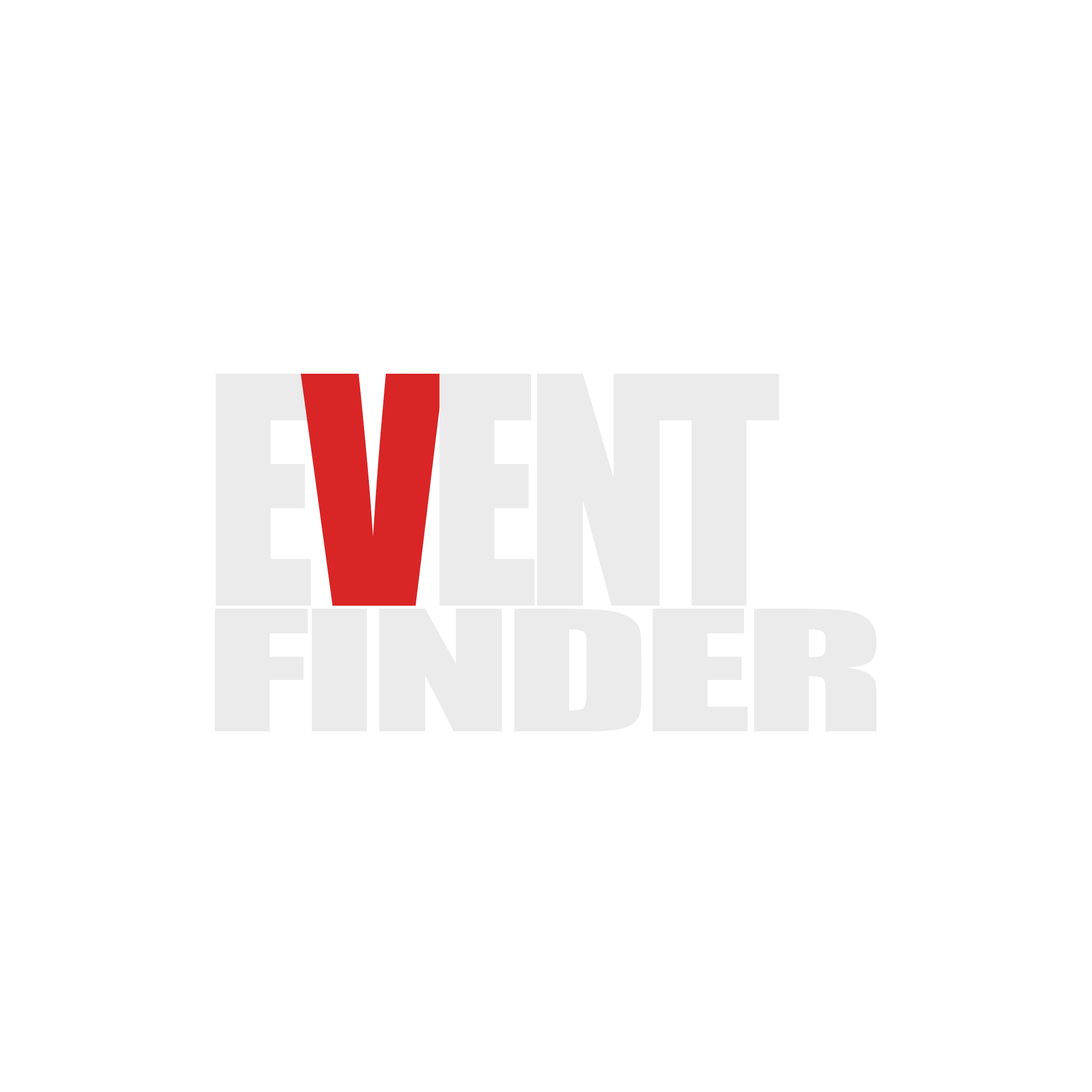
<style>
.page{position:relative;width:1092px;height:1092px;background:#ffffff}
.page>*{position:absolute;margin:0}
.t1{font:293.6px "Impact";letter-spacing:-0.05em;color:#ebebeb;scale:0.91 1}
.t2{font:293.6px "Impact";letter-spacing:-0.05em;color:#d92525;scale:0.91 1}
.t3{font:155.3px "Impact";letter-spacing:-0.035em;color:#ebebeb;scale:1.72 1}
</style>
<div class="page">
<p class="t1" style="left:215px;top:374px;width:564px;height:232px">E<span class="t2">V</span>ENT</p>
<p class="t3" style="left:215px;top:609px;width:662px;height:122px">FINDER</p>
</div>
